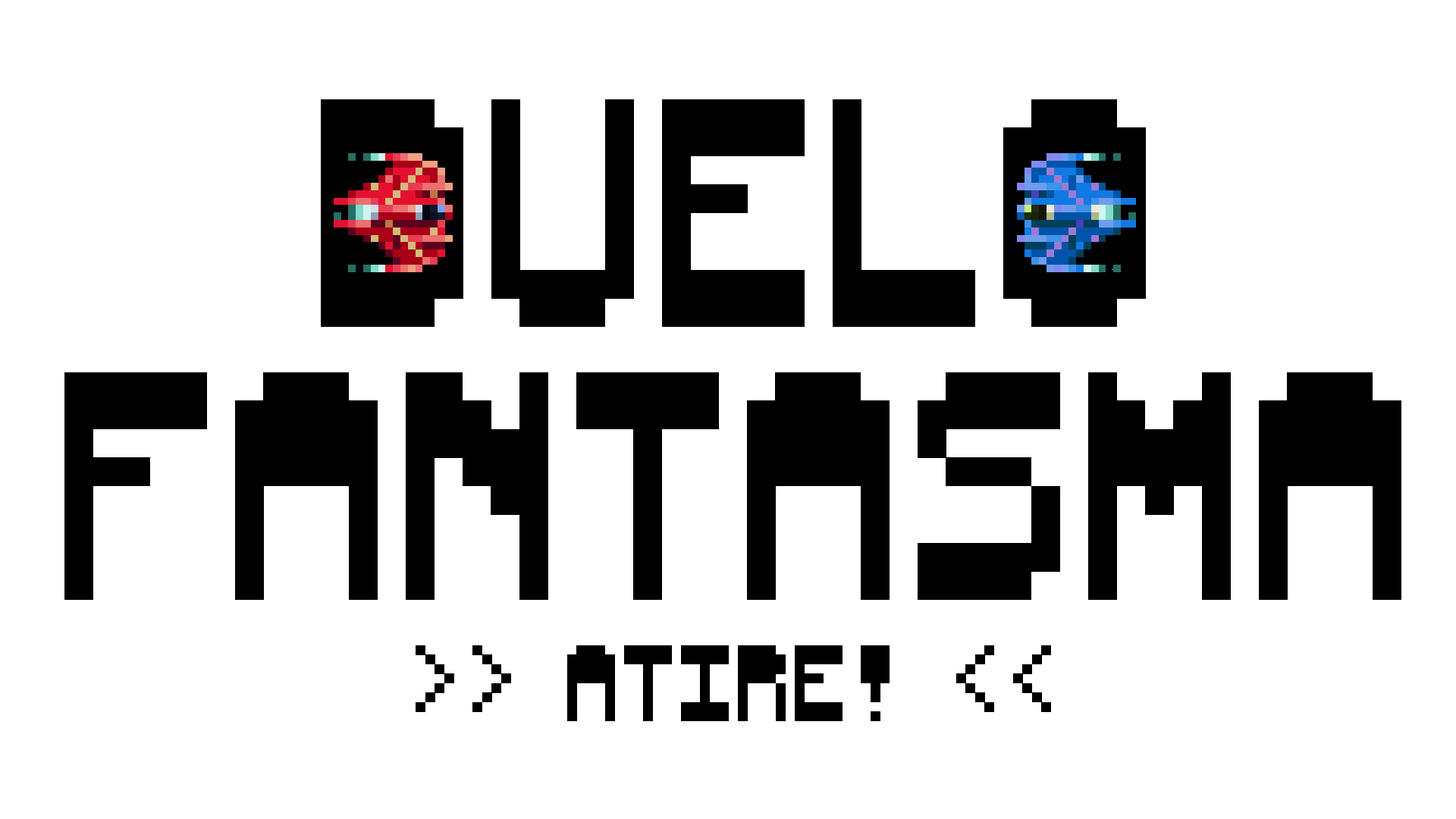
<style>
.page{position:relative;width:1456px;height:819px;background:#ffffff}
.page>*{position:absolute;margin:0}
.t1{font:227.5px "WildBillYonder";color:#000000}
.t2{font:75.8px "WildBillYonder";color:#000000}
</style>
<div class="page">
<p class="t1" style="left:64px;top:99px;width:1337px;height:501px;text-align:center">Duelo<br>Fantasma</p>
<p class="t2" style="left:416px;top:645px;width:635px;height:76px">&gt;&gt; atire! &lt;&lt;</p>
</div>
